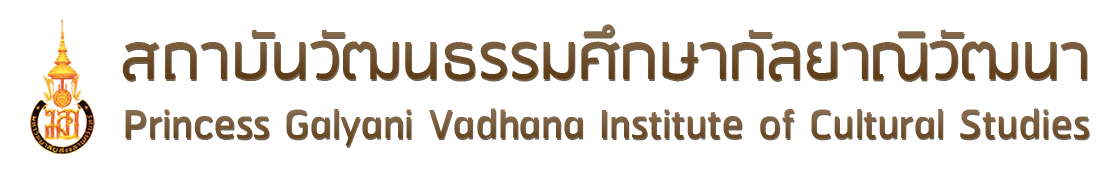
<style>
.page{position:relative;width:1100px;height:170px;background:#ffffff}
.page>*{position:absolute;margin:0}
.t1{font:73.3px "RSU";color:#6d4d29}
.t2{font:51px "RSU";color:#765735}
</style>
<div class="page">
<p class="t1" style="left:122px;top:24px;width:965px;height:56px">สถาบันวัฒนธรรมศึกษากัลยาณิวัฒนา</p>
<p class="t2" style="left:125px;top:108px;width:964px;height:38px">Princess Galyani Vadhana Institute of Cultural Studies</p>
</div>
